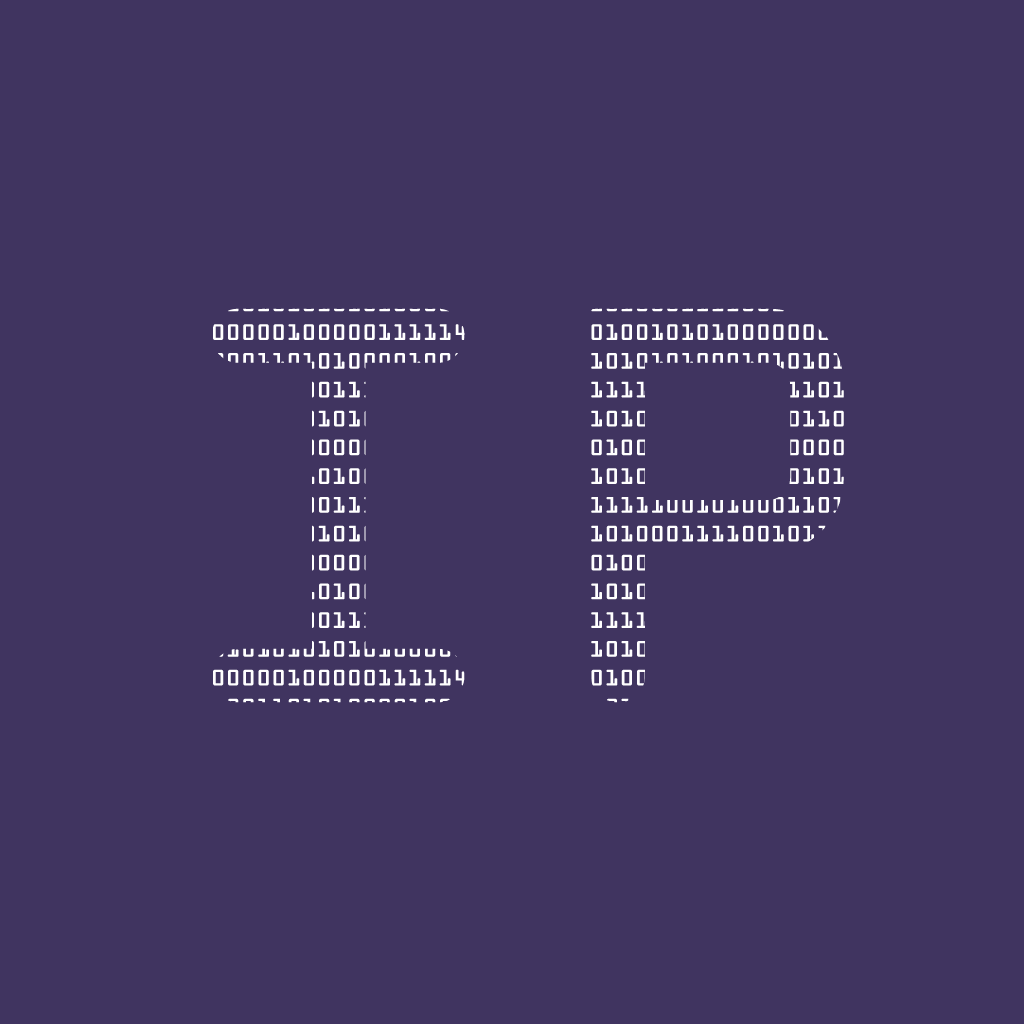
<style>
.page{position:relative;width:1024px;height:1024px;background:#403460}
.page>*{position:absolute;margin:0}
.t1{font:600px "OCRAExtended";color:#403460;font-weight:bold}
</style>
<div class="page">
<p class="t1" style="left:211px;top:308px;width:633px;height:395px">IP</p>
</div>
